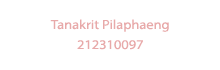
<style>
.page{position:relative;width:220px;height:70px;background:#ffffff}
.page>*{position:absolute;margin:0}
.t1{font:13.2px "MyriadPro-Regular";color:#e8a9a9;scale:1.09 1}
</style>
<div class="page">
<p class="t1" style="left:50px;top:19px;width:119px;height:13px">Tanakrit Pilaphaeng</p>
<p class="t1" style="left:77px;top:40px;width:66px;height:10px">212310097</p>
</div>
